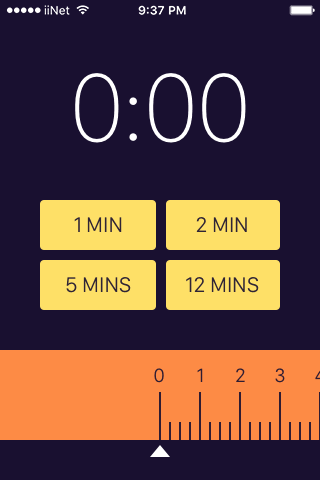
<style>
.page{position:relative;width:320px;height:480px;background:#191030}
.page>*{position:absolute;margin:0}
.t1{font:100px "SanFranciscoDisplay-Thin";color:#ffffff}
.t2{font:22px "SanFranciscoDisplay-Regular";color:#2f2435;text-transform:uppercase}
.t3{font:20px "SanFranciscoDisplay-Regular";color:#2f1c32}
</style>
<div class="page">
<p class="t1" style="left:75px;top:73px;width:171px;height:70px">0:00</p>
<p class="t2" style="left:74px;top:217px;width:48px;height:15px">1 min</p>
<p class="t2" style="left:196px;top:217px;width:51px;height:15px">2 min</p>
<p class="t2" style="left:66px;top:277px;width:65px;height:16px">5 mins</p>
<p class="t2" style="left:186px;top:277px;width:73px;height:16px">12 mins</p>
<p class="t3" style="left:154px;top:368px;width:10px;height:15px">0</p>
<p class="t3" style="left:197px;top:368px;width:6px;height:14px">1</p>
<p class="t3" style="left:236px;top:368px;width:9px;height:14px">2</p>
<p class="t3" style="left:275px;top:368px;width:10px;height:15px">3</p>
</div>
